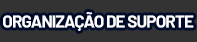
<style>
.page{position:relative;width:197px;height:42px;background:#333333}
.page>*{position:absolute;margin:0}
.t1{font:17px "Barlow-Bold";letter-spacing:-0.05em;color:#ffffff}
</style>
<div class="page">
<p class="t1" style="left:3px;top:12px;width:191px;height:19px">ORGANIZAÇÃO DE SUPORTE</p>
</div>
